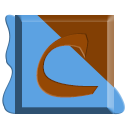
<style>
.page{position:relative;width:128px;height:128px;background:#ffffff}
.page>*{position:absolute;margin:0}
.t1{font:70.5px "MaturaMTScriptCapitals";letter-spacing:0.015em;color:#954804;text-transform:uppercase}
</style>
<div class="page">
<p class="t1" style="left:36px;top:33px;width:63px;height:65px;rotate:-2deg">C</p>
</div>
